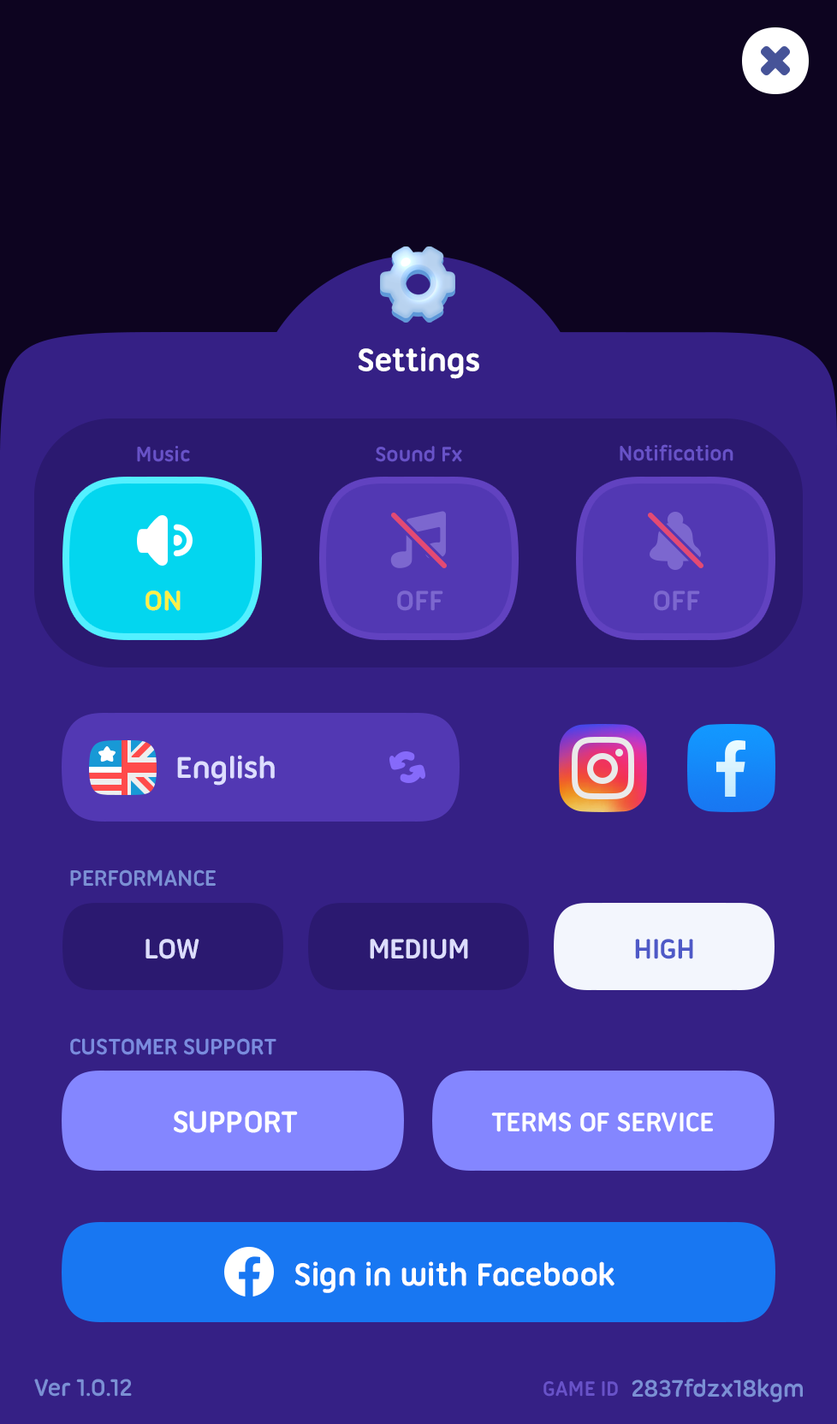
<style>
.page{position:relative;width:837px;height:1424px;background:#352085}
.page>*{position:absolute;margin:0}
.t1{font:34.2px "UbuntuTitling-Bold";letter-spacing:-0.025em;color:#ffffff}
.t2{font:22.3px "UbuntuTitling-Bold";letter-spacing:-0.025em;color:#6852c8}
.t3{font:30px "UbuntuTitling-Bold";letter-spacing:-0.025em;color:#fff045;text-transform:uppercase}
.t4{font:30px "UbuntuTitling-Bold";letter-spacing:-0.025em;color:#7c67cf;text-transform:uppercase}
.t5{font:32.5px "UbuntuTitling-Bold";letter-spacing:-0.025em;color:#ddddff}
.t6{font:24px "UbuntuTitling-Bold";letter-spacing:-0.025em;color:#7a8bde;text-transform:uppercase}
.t7{font:30px "UbuntuTitling-Bold";letter-spacing:-0.025em;color:#ddddff;text-transform:uppercase}
.t8{font:30px "UbuntuTitling-Bold";letter-spacing:-0.025em;color:#4e59c7;text-transform:uppercase}
.t9{font:32.5px "UbuntuTitling-Bold";letter-spacing:-0.025em;color:#ffffff;text-transform:uppercase}
.t10{font:29.1px "UbuntuTitling-Bold";letter-spacing:-0.025em;color:#ffffff;text-transform:uppercase}
.t11{font:25.7px "UbuntuTitling-Bold";letter-spacing:-0.025em;color:#7b90d4}
.t12{font:22.3px "UbuntuTitling-Bold";letter-spacing:-0.025em;color:#6852c8;text-transform:uppercase}
</style>
<div class="page">
<p class="t1" style="left:358px;top:347px;width:121px;height:32px">Settings</p>
<p class="t2" style="left:137px;top:446px;width:53px;height:16px">Music</p>
<p class="t2" style="left:376px;top:446px;width:86px;height:16px">Sound Fx</p>
<p class="t2" style="left:620px;top:444px;width:114px;height:17px">Notification</p>
<p class="t3" style="left:146px;top:591px;width:35px;height:20px">On</p>
<p class="t4" style="left:397px;top:591px;width:46px;height:20px">Off</p>
<p class="t4" style="left:654px;top:591px;width:46px;height:20px">Off</p>
<p class="t5" style="left:177px;top:755px;width:98px;height:31px">English</p>
<p class="t6" style="left:70px;top:870px;width:146px;height:17px">Performance</p>
<p class="t7" style="left:146px;top:939px;width:53px;height:21px">Low</p>
<p class="t7" style="left:370px;top:939px;width:98px;height:21px">Medium</p>
<p class="t8" style="left:635px;top:939px;width:58px;height:21px">High</p>
<p class="t6" style="left:70px;top:1038px;width:206px;height:17px">Customer Support</p>
<p class="t9" style="left:174px;top:1111px;width:124px;height:22px">Support</p>
<p class="t10" style="left:491px;top:1112px;width:222px;height:20px">Terms of Service</p>
<p class="t1" style="left:295px;top:1262px;width:320px;height:31px">Sign in with Facebook</p>
<p class="t11" style="left:34px;top:1379px;width:98px;height:18px">Ver 1.0.12</p>
<p class="t12" style="left:544px;top:1382px;width:74px;height:15px">Game ID</p>
<p class="t11" style="left:632px;top:1379px;width:171px;height:24px">2837fdzx18kgm</p>
</div>
